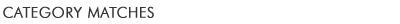
<style>
.page{position:relative;width:400px;height:24px;background:#ffffff}
.page>*{position:absolute;margin:0}
.t1{font:14.7px "FuturaBT-Light";letter-spacing:0.025em;color:#363636;text-transform:uppercase;font-weight:bold}
</style>
<div class="page">
<p class="t1" style="left:3px;top:6px;width:151px;height:12px">CATEGORY MATCHES</p>
</div>
